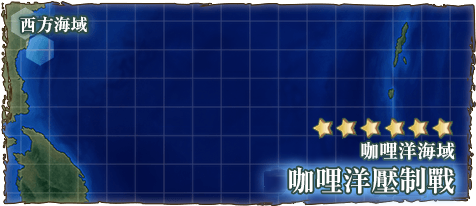
<style>
.page{position:relative;width:476px;height:206px}
.page>*{position:absolute;margin:0}
.t1{font:17px "RyuminPr6N-ExBold";color:#ffffff}
.t2{font:19px "RyuminPr6N-ExBold";color:#ffffff}
.t3{font:28px "RyuminPr6N-ExBold";color:#ffffff}
</style>
<div class="page">
<p class="t1" style="left:20px;top:16px;width:67px;height:17px">西方海域</p>
<p class="t2" style="left:361px;top:142px;width:94px;height:18px">咖哩洋海域</p>
<p class="t3" style="left:289px;top:167px;width:166px;height:27px">咖哩洋壓制戰</p>
</div>
